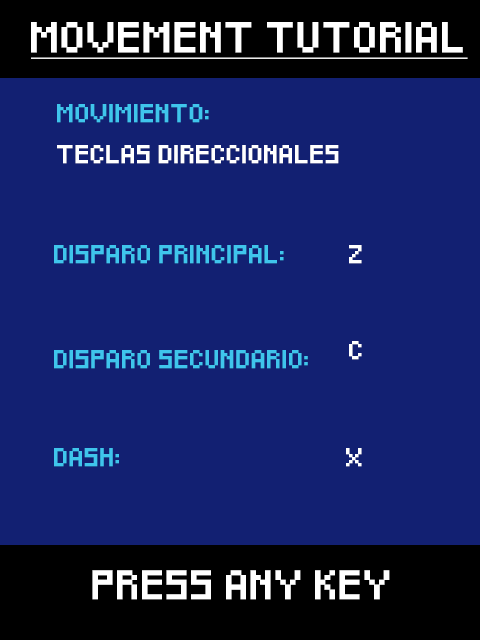
<style>
.page{position:relative;width:480px;height:640px;background:#122072}
.page>*{position:absolute;margin:0}
.t1{font:25px "Pixeled";color:#ffffff;font-weight:bold;text-decoration:underline}
.t2{font:15px "Pixeled";color:#3fc5ec;font-weight:bold}
.t3{font:15px "Pixeled";color:#ffffff;font-weight:bold}
.t4{font:24px "Pixeled";color:#ffffff;font-weight:bold}
</style>
<div class="page">
<p class="t1" style="left:31px;top:22px;width:437px;height:37px">MOVEMENT TUTORIAL</p>
<p class="t2" style="left:57px;top:104px;width:152px;height:19px">MOVIMIENTO:</p>
<p class="t3" style="left:57px;top:145px;width:282px;height:19px">TECLAS DIRECCIONALES</p>
<p class="t2" style="left:54px;top:245px;width:230px;height:19px">DISPARO PRINCIPAL:</p>
<p class="t3" style="left:349px;top:245px;width:13px;height:19px">Z</p>
<p class="t3" style="left:349px;top:341px;width:13px;height:19px">C</p>
<p class="t2" style="left:54px;top:350px;width:254px;height:19px">DISPARO SECUNDARIO:</p>
<p class="t2" style="left:54px;top:448px;width:65px;height:19px">DASH:</p>
<p class="t3" style="left:346px;top:448px;width:16px;height:19px">X</p>
<p class="t4" style="left:92px;top:570px;width:298px;height:30px">PRESS ANY KEY</p>
</div>
